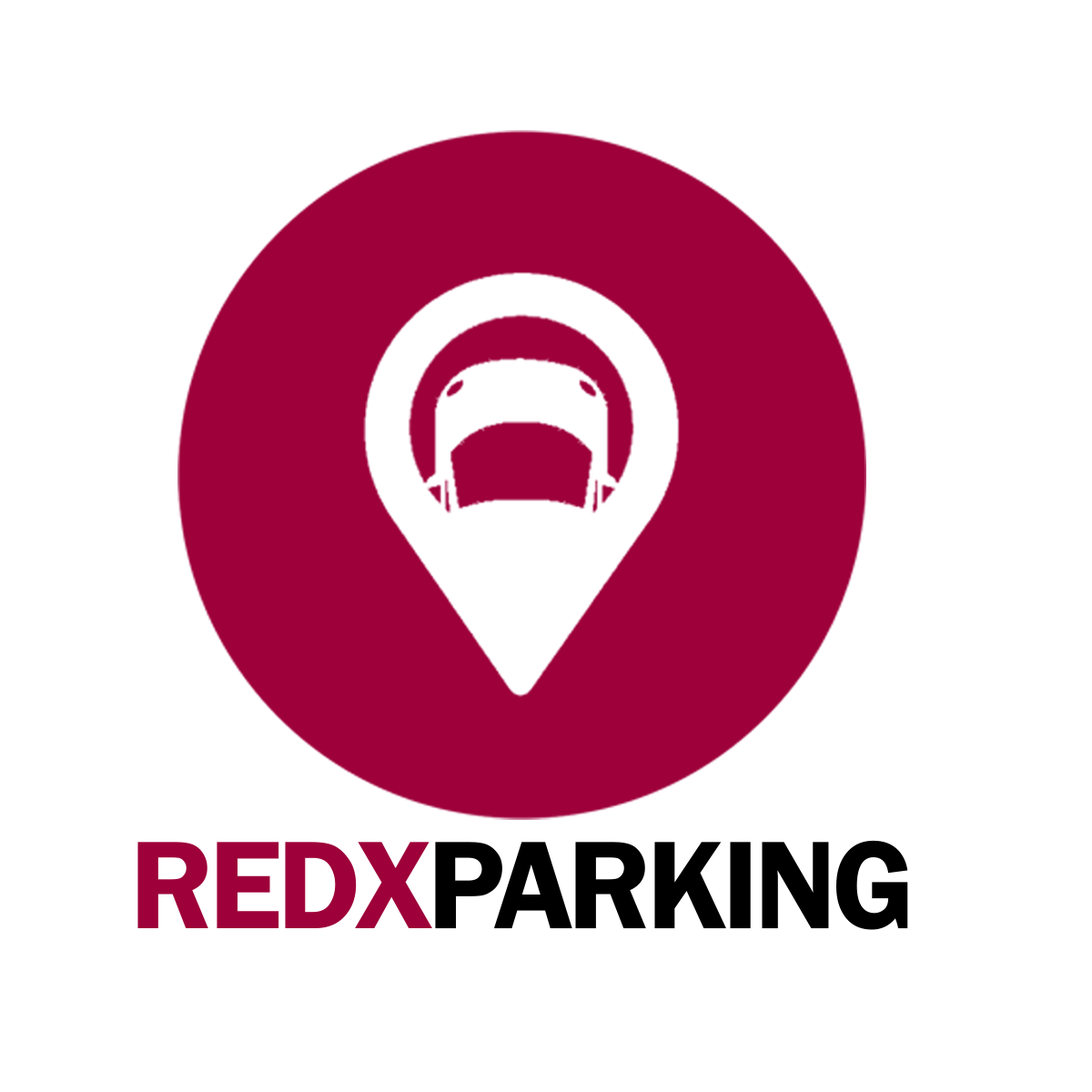
<style>
.page{position:relative;width:1092px;height:1092px;background:#ffffff}
.page>*{position:absolute;margin:0}
.t1{font:129.6px "FranklinGothic-Demi";letter-spacing:-0.045em;color:#000000}
.t2{font:129.6px "FranklinGothic-Demi";letter-spacing:-0.045em;color:#9e0039}
</style>
<div class="page">
<p class="t1" style="left:137px;top:840px;width:771px;height:90px"><span class="t2">REDX</span>PARKING</p>
</div>
